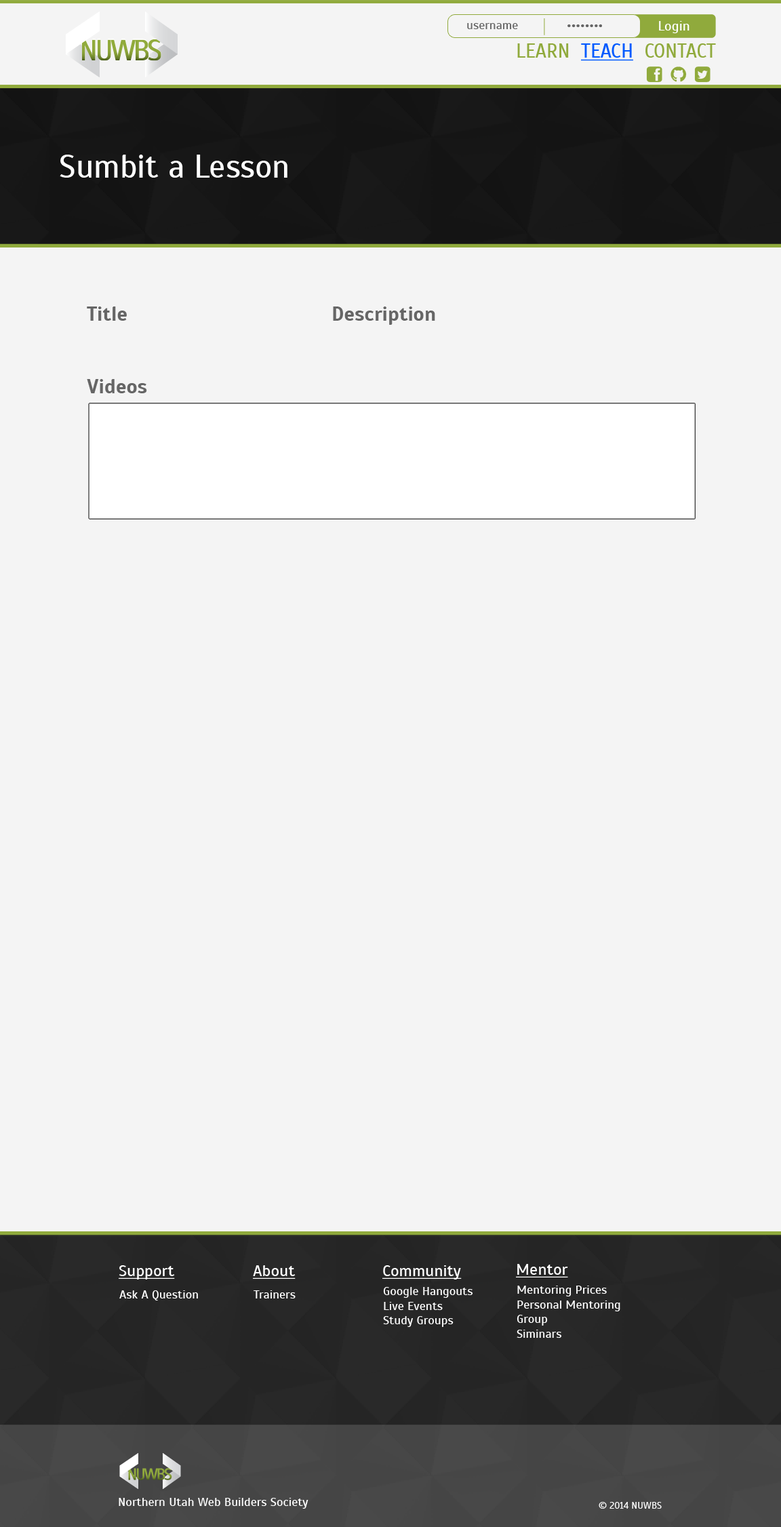
<style>
.page{position:relative;width:781px;height:1527px;background:#f4f4f4}
.page>*{position:absolute;margin:0}
.t1{font:12.2px "Scada-Regular";color:#666666}
.t2{font:13.8px "Scada-Regular";color:#ffffff}
.t3{font:19.4px "Scada-Regular";color:#90aa3c;text-transform:uppercase}
.t4{font:19.4px "Scada-Regular";color:#005aff;text-transform:uppercase;text-decoration:underline}
.t5{font:32.5px "Scada-Regular";color:#ffffff}
.t6{font:20.3px "Scada-Bold";color:#666666}
.t7{font:16.3px "Scada-Regular";color:#ffffff;text-decoration:underline}
.t8{font:12.2px "Scada-Regular";color:#ffffff}
.t9{font:9.5px "Scada-Regular";color:#ffffff}
</style>
<div class="page">
<p class="t1" style="left:467px;top:23px;width:51px;height:6px">username</p>
<p class="t1" style="left:567px;top:24px;width:35px;height:3px">••••••••</p>
<p class="t2" style="left:659px;top:21px;width:30px;height:12px">Login</p>
<p class="t3" style="left:517px;top:43px;width:199px;height:18px">Learn  <span class="t4">Teach</span>  Contact</p>
<p class="t5" style="left:60px;top:155px;width:227px;height:23px">Sumbit a Lesson</p>
<p class="t6" style="left:87px;top:306px;width:40px;height:15px">Title</p>
<p class="t6" style="left:333px;top:306px;width:102px;height:19px">Description</p>
<p class="t6" style="left:87px;top:379px;width:60px;height:14px">Videos</p>
<p class="t7" style="left:119px;top:1265px;width:56px;height:14px">Support</p>
<p class="t7" style="left:253px;top:1265px;width:43px;height:14px">About</p>
<p class="t7" style="left:382px;top:1265px;width:80px;height:14px">Community</p>
<p class="t7" style="left:516px;top:1264px;width:52px;height:13px">Mentor</p>
<p class="t8" style="left:383px;top:1287px;width:90px;height:40px">Google Hangouts<br>Live Events<br>Study Groups</p>
<p class="t8" style="left:517px;top:1285px;width:103px;height:53px">Mentoring Prices<br>Personal Mentoring<br>Group<br>Siminars</p>
<p class="t8" style="left:119px;top:1290px;width:79px;height:10px">Ask A Question</p>
<p class="t8" style="left:254px;top:1290px;width:42px;height:8px">Trainers</p>
<p class="t8" style="left:119px;top:1498px;width:189px;height:10px">Northern Utah Web Builders Society</p>
<p class="t9" style="left:599px;top:1502px;width:63px;height:6px">© 2014 NUWBS</p>
</div>
